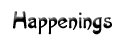
<style>
.page{position:relative;width:130px;height:43px;background:#ffffff}
.page>*{position:absolute;margin:0}
.t1{font:24px "Artistik";color:#000000}
</style>
<div class="page">
<p class="t1" style="left:13px;top:11px;width:99px;height:24px">Happenings</p>
</div>
